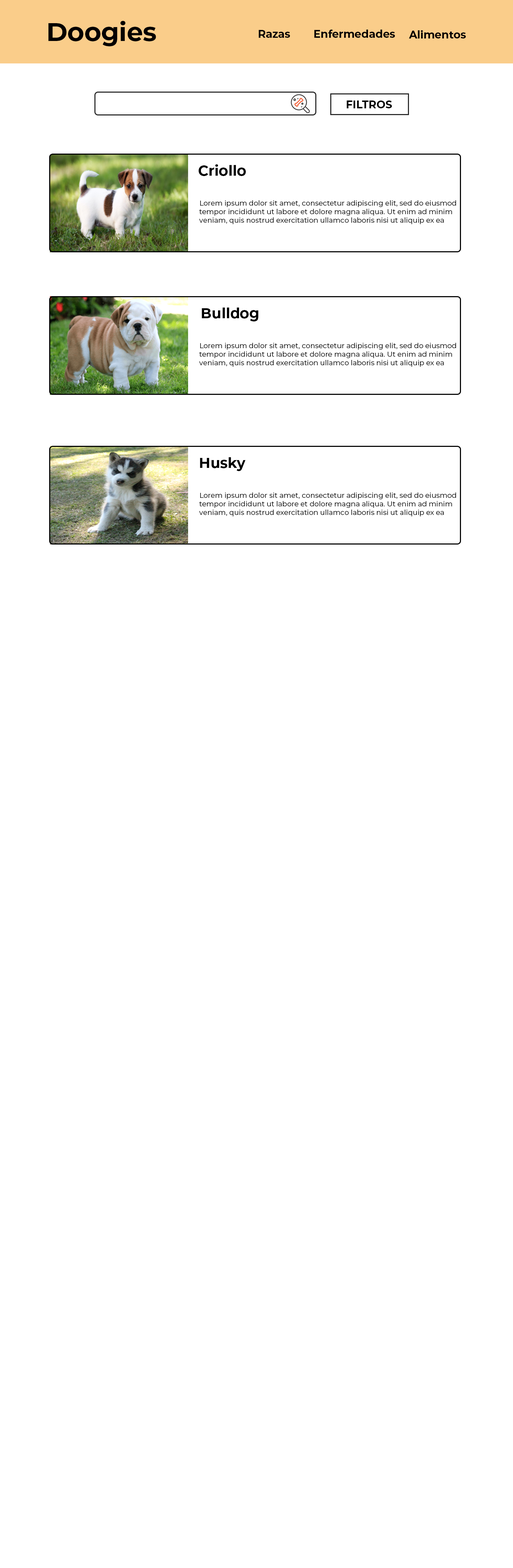
<style>
.page{position:relative;width:513px;height:1568px;background:#ffffff}
.page>*{position:absolute;margin:0}
.t1{font:10.7px "Montserrat-Bold";color:#000000}
.t2{font:14.3px "Montserrat-Bold";color:#000000}
.t3{font:7.1px "Montserrat-Regular";color:#000000}
</style>
<div class="page">
<p class="t1" style="left:347px;top:100px;width:45px;height:8px">FILTROS</p>
<p class="t2" style="left:198px;top:164px;width:48px;height:12px">Criollo</p>
<p class="t3" style="left:199px;top:200px;width:257px;height:24px">Lorem ipsum dolor sit amet, consectetur adipiscing elit, sed do eiusmod<br>tempor incididunt ut labore et dolore magna aliqua. Ut enim ad minim<br>veniam, quis nostrud exercitation ullamco laboris nisi ut aliquip ex ea</p>
<p class="t2" style="left:202px;top:308px;width:56px;height:13px">Bulldog</p>
<p class="t3" style="left:199px;top:343px;width:257px;height:24px">Lorem ipsum dolor sit amet, consectetur adipiscing elit, sed do eiusmod<br>tempor incididunt ut labore et dolore magna aliqua. Ut enim ad minim<br>veniam, quis nostrud exercitation ullamco laboris nisi ut aliquip ex ea</p>
<p class="t2" style="left:200px;top:457px;width:46px;height:14px">Husky</p>
<p class="t3" style="left:199px;top:492px;width:257px;height:24px">Lorem ipsum dolor sit amet, consectetur adipiscing elit, sed do eiusmod<br>tempor incididunt ut labore et dolore magna aliqua. Ut enim ad minim<br>veniam, quis nostrud exercitation ullamco laboris nisi ut aliquip ex ea</p>
</div>
